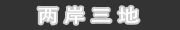
<style>
.page{position:relative;width:180px;height:30px;background:#333333}
.page>*{position:absolute;margin:0}
.t1{font:18px "AdobeHeitiStd-Regular";letter-spacing:0.24em;color:#ffffff;scale:1.2 1}
</style>
<div class="page">
<p class="t1" style="left:38px;top:6px;width:101px;height:18px">两岸三地</p>
</div>
